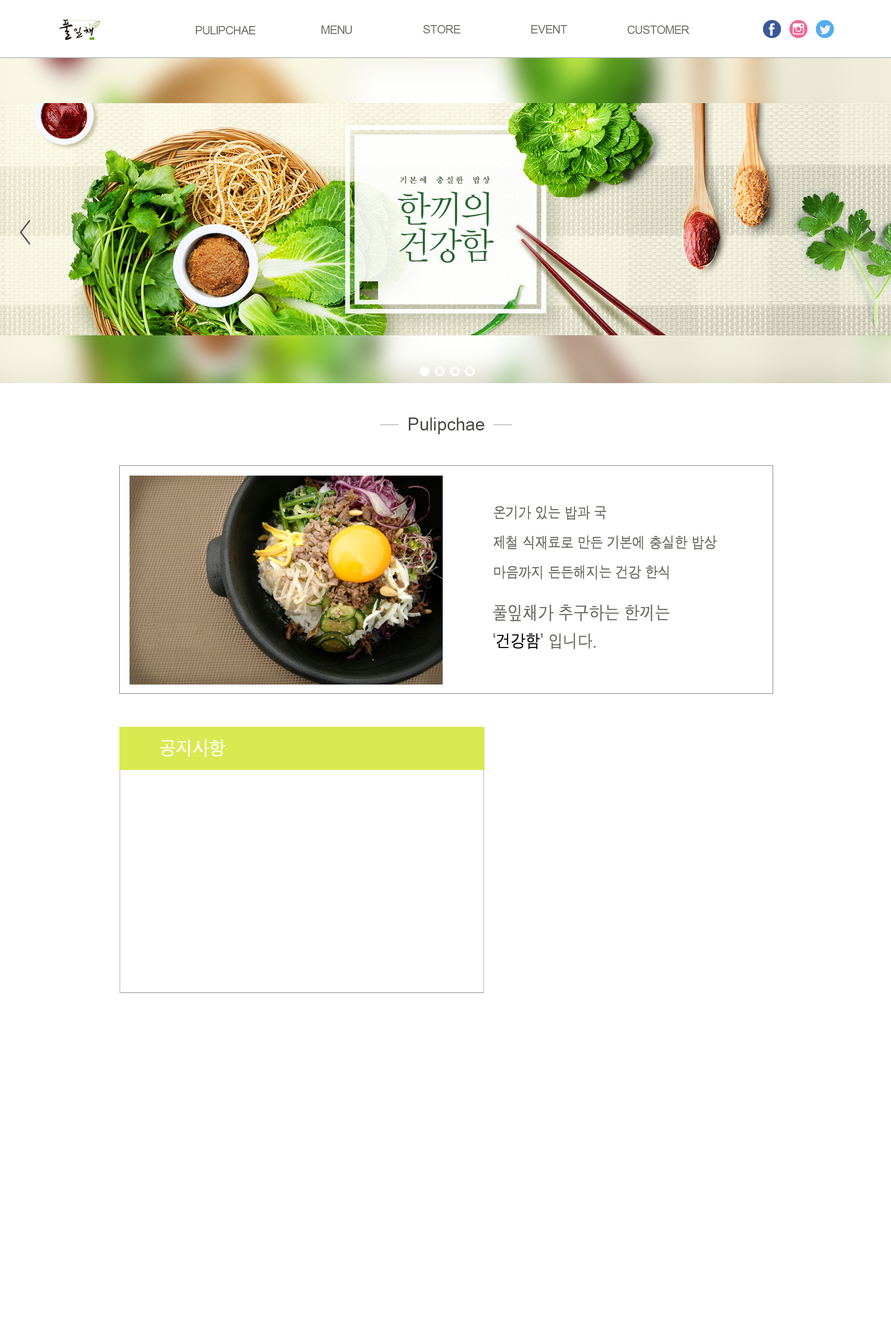
<style>
.page{position:relative;width:891px;height:1338px;background:#ffffff}
.page>*{position:absolute;margin:0}
.t1{font:11.8px "ArialMT";color:#6c6b66}
.t2{font:11.6px "ArialMT";color:#6c6b66}
.t3{font:18.1px "ArialNarrow";color:#484744;scale:1.2 1}
.t4{font:15.3px "Dotum";letter-spacing:-0.05em;color:#6c6b66;font-weight:bold;scale:0.85 1}
.t5{font:18.4px "Dotum";letter-spacing:-0.05em;color:#6c6b66;font-weight:bold;scale:0.85 1}
.t6{font:17.5px "Dotum";letter-spacing:-0.05em;color:#6c6b66;font-weight:bold;scale:0.85 1}
.t7{font:17.5px "Dotum";letter-spacing:-0.05em;color:#000000;font-weight:bold;scale:0.85 1}
.t8{font:19.8px "Dotum";letter-spacing:-0.05em;color:#ffffff;font-weight:bold;scale:0.85 1}
</style>
<div class="page">
<p class="t1" style="left:196px;top:26px;width:60px;height:8px">PULIPCHAE</p>
<p class="t2" style="left:321px;top:26px;width:31px;height:8px">MENU</p>
<p class="t1" style="left:423px;top:25px;width:38px;height:8px">STORE</p>
<p class="t1" style="left:532px;top:25px;width:35px;height:8px">EVENT</p>
<p class="t1" style="left:628px;top:26px;width:61px;height:8px">CUSTOMER</p>
<p class="t3" style="left:409px;top:417px;width:76px;height:17px">Pulipchae</p>
<p class="t4" style="left:494px;top:506px;width:113px;height:14px">온기가 있는 밥과 국</p>
<p class="t4" style="left:494px;top:535px;width:223px;height:15px">제철 식재료로 만든 기본에 충실한 밥상</p>
<p class="t4" style="left:494px;top:565px;width:175px;height:14px">마음까지 든든해지는 건강 한식</p>
<p class="t5" style="left:493px;top:605px;width:177px;height:16px">풀잎채가 추구하는 한끼는</p>
<p class="t6" style="left:494px;top:633px;width:102px;height:16px">‘<span class="t7">건강함</span>’ 입니다.</p>
<p class="t8" style="left:160px;top:739px;width:66px;height:18px">공지사항</p>
</div>
